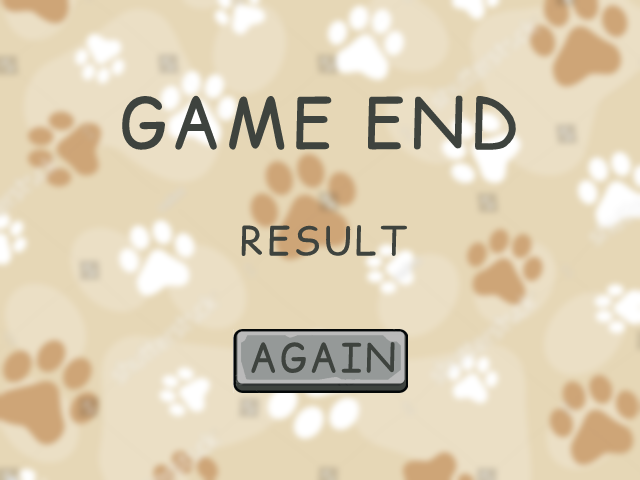
<style>
.page{position:relative;width:640px;height:480px;background:#e6d7b6}
.page>*{position:absolute;margin:0}
.t1{font:70px "ComicRelief";letter-spacing:0.05em;color:#3e433e}
.t2{font:40px "ComicRelief";letter-spacing:0.05em;color:#3e433e}
</style>
<div class="page">
<p class="t1" style="left:122px;top:95px;width:395px;height:57px">GAME END</p>
<p class="t2" style="left:241px;top:215px;width:167px;height:42px">RESULT</p>
<p class="t2" style="left:250px;top:341px;width:145px;height:33px">AGAIN</p>
</div>
